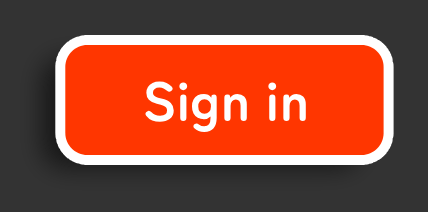
<style>
.page{position:relative;width:428px;height:212px;background:#333333}
.page>*{position:absolute;margin:0}
.t1{font:55px "ZenMaruGothic-Bold";color:#ffffff}
</style>
<div class="page">
<p class="t1" style="left:145px;top:81px;width:161px;height:51px">Sign in</p>
</div>
